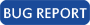
<style>
.page{position:relative;width:90px;height:25px;background:#1a4a99}
.page>*{position:absolute;margin:0}
.t1{font:15.6px "EstrangeloEdessa";color:#ffffff}
</style>
<div class="page">
<p class="t1" style="left:4px;top:7px;width:83px;height:12px">BUG REPORT</p>
</div>
